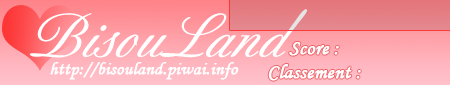
<style>
.page{position:relative;width:450px;height:85px}
.page>*{position:absolute;margin:0}
.t1{font:20px "MonotypeCorsiva";color:#ffffff;font-weight:bold}
.t2{font:18px "MonotypeCorsiva";color:#ffffff;font-weight:bold}
</style>
<div class="page">
<p class="t1" style="left:268px;top:42px;width:93px;height:39px;text-align:center">Score :<br>Classement :</p>
<p class="t2" style="left:50px;top:62px;width:189px;height:18px">http://bisouland.piwai.info</p>
</div>
